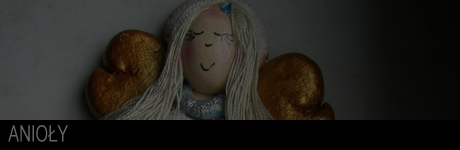
<style>
.page{position:relative;width:460px;height:150px}
.page>*{position:absolute;margin:0}
.t1{font:22.4px "HelveticaNeueCE-Light";letter-spacing:0.05em;color:#666666;scale:0.71 1}
</style>
<div class="page">
<p class="t1" style="left:8px;top:125px;width:60px;height:17px">ANIOŁY</p>
</div>
